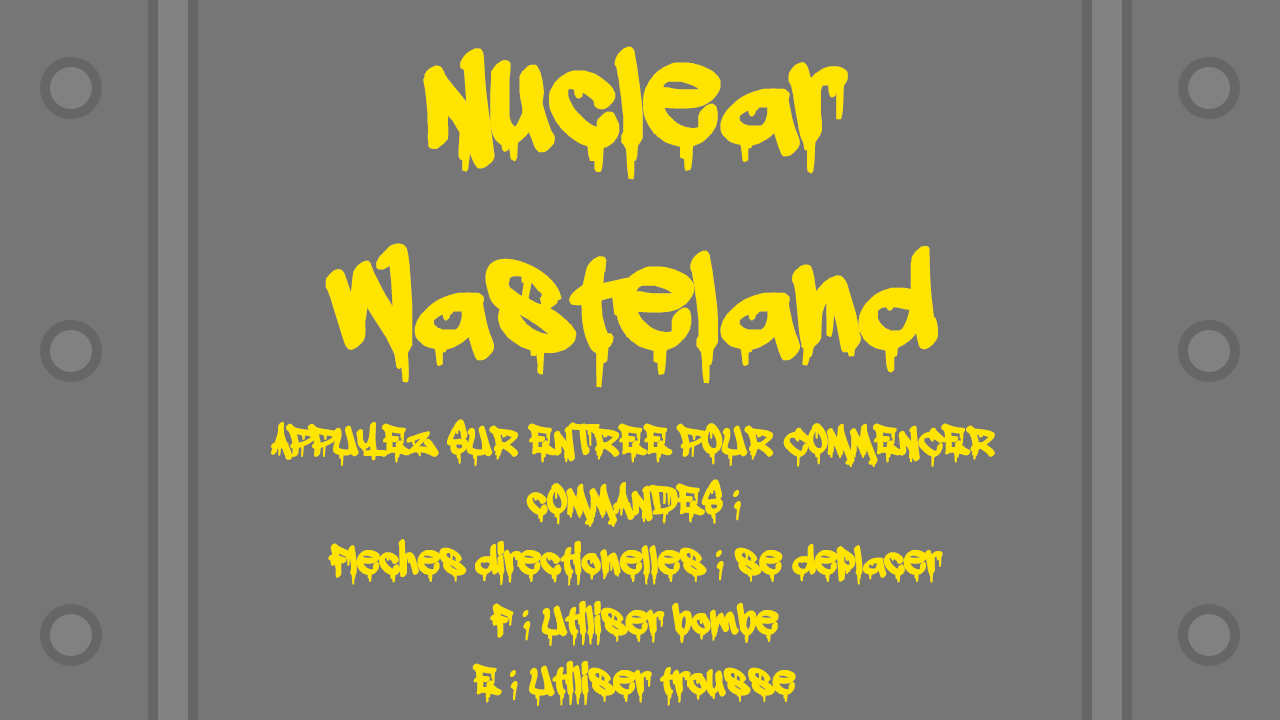
<style>
.page{position:relative;width:1280px;height:720px;background:#767676}
.page>*{position:absolute;margin:0}
.t1{font:170px "adrippingmarker";color:#ffe400;font-weight:bold}
.t2{font:50px "adrippingmarker";color:#ffe400;font-weight:bold}
</style>
<div class="page">
<p class="t1" style="left:325px;top:46px;width:613px;height:342px;text-align:center">Nuclear Wasteland</p>
<p class="t2" style="left:271px;top:419px;width:724px;height:48px">APPUYEZ SUR ENTREE POUR COMMENCER</p>
<p class="t2" style="left:328px;top:479px;width:615px;height:227px;text-align:center">cOMMANDES :<br>Fleches directionelles : se deplacer<br>F : Utiliser bombe<br>E : Utiliser trousse</p>
</div>
